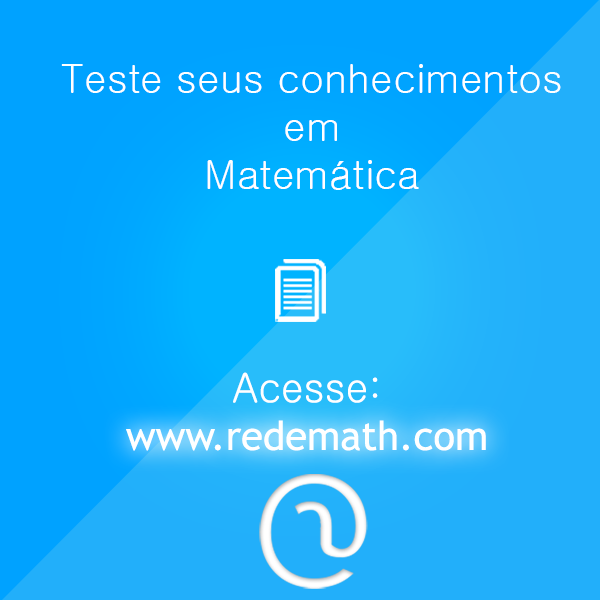
<style>
.page{position:relative;width:600px;height:600px;background:#22affa}
.page>*{position:absolute;margin:0}
.t1{font:40px "Gulim";color:#ffffff}
.t2{font:40px "TrebuchetMS";color:#ffffff}
</style>
<div class="page">
<p class="t1" style="left:61px;top:64px;width:500px;height:126px;text-align:center">Teste seus conhecimentos<br>em<br>Matemática</p>
<p class="t1" style="left:233px;top:372px;width:145px;height:31px">Acesse:</p>
<p class="t2" style="left:126px;top:420px;width:360px;height:31px"><span class="t1"><br></span>www.redemath.com</p>
</div>
